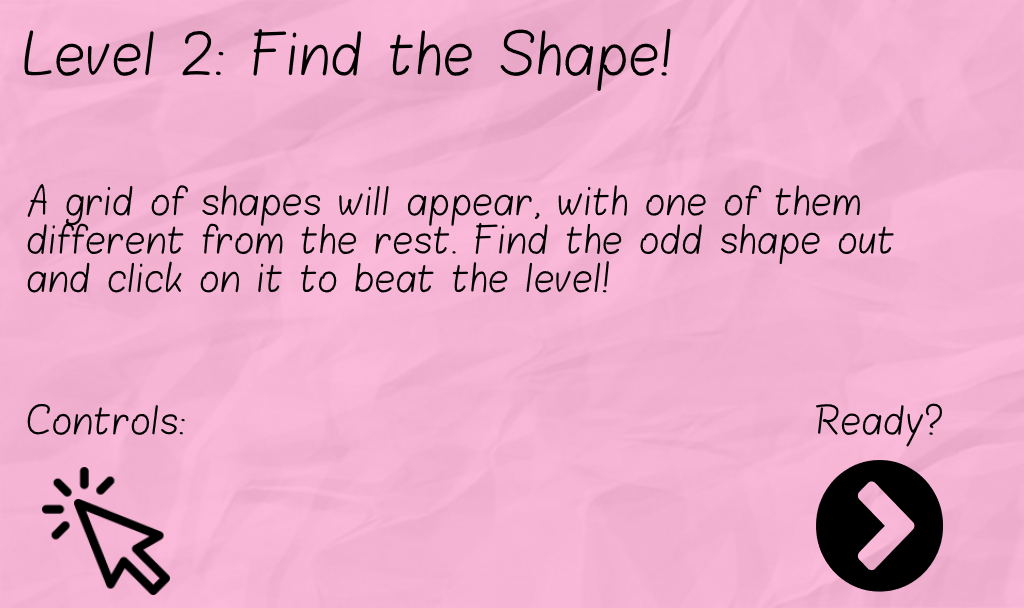
<style>
.page{position:relative;width:1024px;height:608px}
.page>*{position:absolute;margin:0}
.t1{font:48px "Blokletters-Balpen";color:#000000}
.t2{font:32px "Blokletters-Balpen";color:#000000}
</style>
<div class="page">
<p class="t1" style="left:24px;top:28px;width:647px;height:63px">Level 2: Find the Shape!</p>
<p class="t2" style="left:27px;top:183px;width:867px;height:110px">A grid of shapes will appear, with one of them different from the rest. Find the odd shape out and click on it to beat the level!</p>
<p class="t2" style="left:27px;top:403px;width:158px;height:32px">Controls:</p>
<p class="t2" style="left:815px;top:403px;width:128px;height:44px">Ready?</p>
</div>
